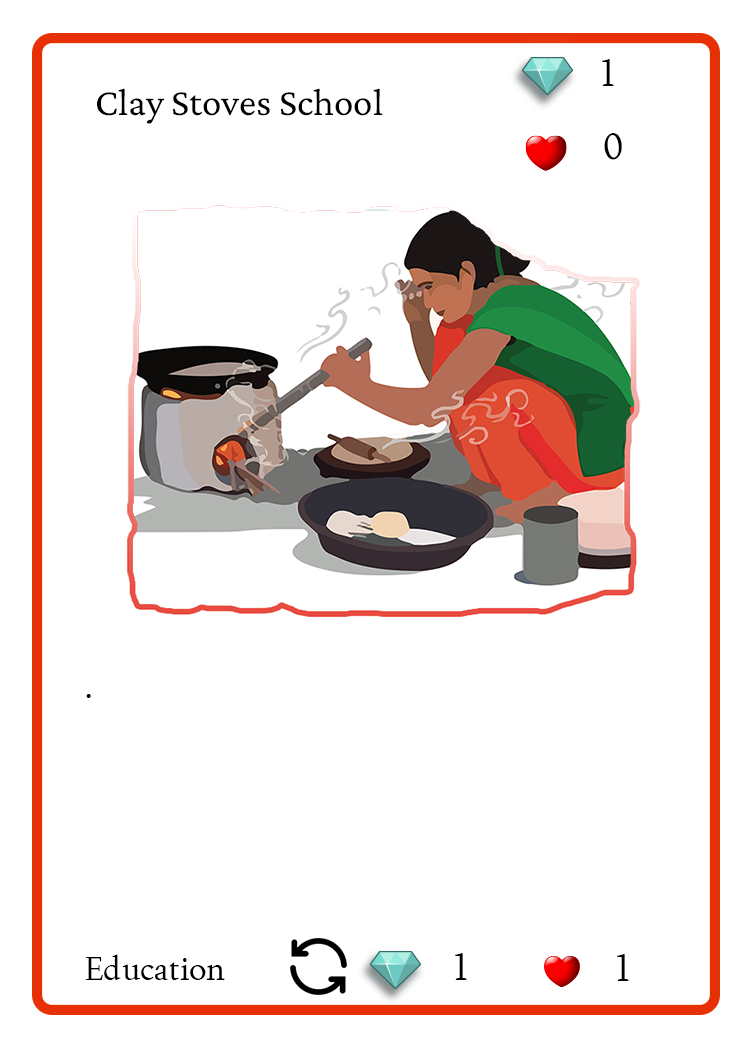
<style>
.page{position:relative;width:750px;height:1050px;background:#ffffff}
.page>*{position:absolute;margin:0}
.t1{font:37.5px "Joan-Regular";color:#000000;text-transform:uppercase}
.t2{font:38.9px "CrimsonPro-Regular";color:#000000}
.t3{font:33.3px "Joan-Regular";color:#000000}
</style>
<div class="page">
<p class="t1" style="left:602px;top:59px;width:12px;height:27px">1</p>
<p class="t2" style="left:97px;top:88px;width:286px;height:36px">Clay Stoves School</p>
<p class="t1" style="left:604px;top:133px;width:18px;height:27px">0</p>
<p class="t3" style="left:86px;top:694px;width:5px;height:4px">.</p>
<p class="t1" style="left:455px;top:953px;width:12px;height:27px">1</p>
<p class="t3" style="left:85px;top:954px;width:140px;height:26px">Education</p>
<p class="t1" style="left:617px;top:954px;width:12px;height:27px">1</p>
</div>
